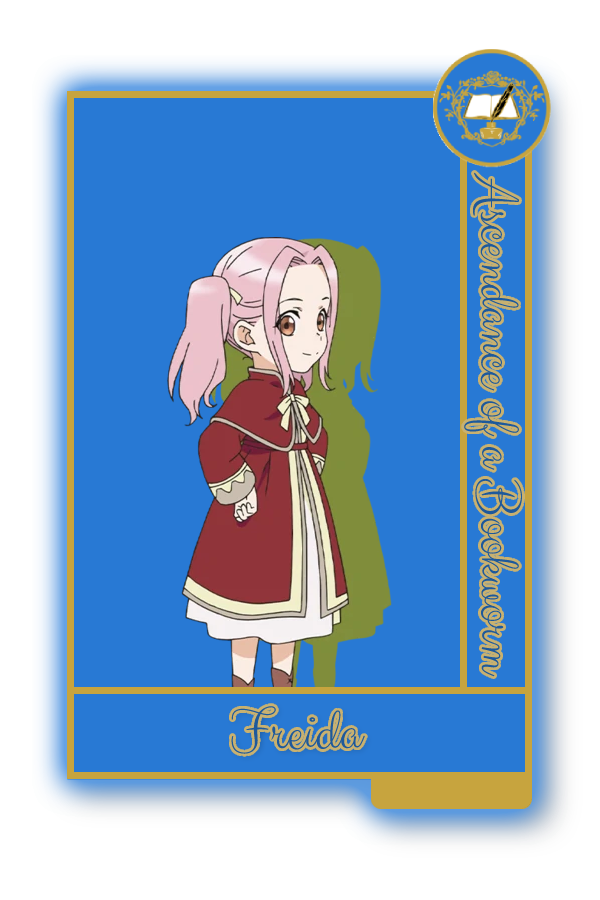
<style>
.page{position:relative;width:600px;height:900px;background:#2879d4}
.page>*{position:absolute;margin:0}
.t1{font:58px "ClickerScript-Regular";color:#1d599c}
.t2{font:60px "ClickerScript-Regular";color:#1d599c}
</style>
<div class="page">
<p class="t1" style="left:464px;top:172px;width:59px;height:505px;rotate:90deg">Ascendance of a Bookworm</p>
<p class="t2" style="left:231px;top:706px;width:134px;height:48px">Freida</p>
</div>
